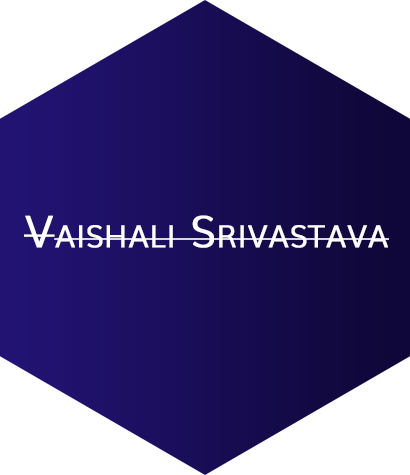
<style>
.page{position:relative;width:410px;height:475px;background:#ffffff}
.page>*{position:absolute;margin:0}
.t1{font:75px "Muli-Light";color:#ffffff;font-variant:small-caps;font-weight:bold}
</style>
<div class="page">
<p class="t1" style="left:24px;top:215px;width:365px;height:33px">Vaishali Srivastava</p>
</div>
